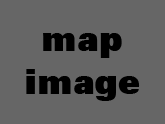
<style>
.page{position:relative;width:165px;height:124px;background:#666666}
.page>*{position:absolute;margin:0}
.t1{font:35.4px "ZurichBT-ExtraBlack";color:#000000}
</style>
<div class="page">
<p class="t1" style="left:26px;top:33px;width:114px;height:68px;text-align:center">map<br>image</p>
</div>
